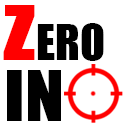
<style>
.page{position:relative;width:128px;height:128px;background:#ffffff}
.page>*{position:absolute;margin:0}
.t1{font:69.6px "Impact";color:#ff0000;scale:1.18 1}
.t2{font:45.8px "Impact";color:#000000}
.t3{font:63.9px "Impact";color:#000000;scale:1.13 1}
</style>
<div class="page">
<p class="t1" style="left:3px;top:5px;width:32px;height:55px">Z</p>
<p class="t2" style="left:37px;top:23px;width:67px;height:38px">ERO</p>
<p class="t3" style="left:7px;top:70px;width:54px;height:51px">IN</p>
</div>
